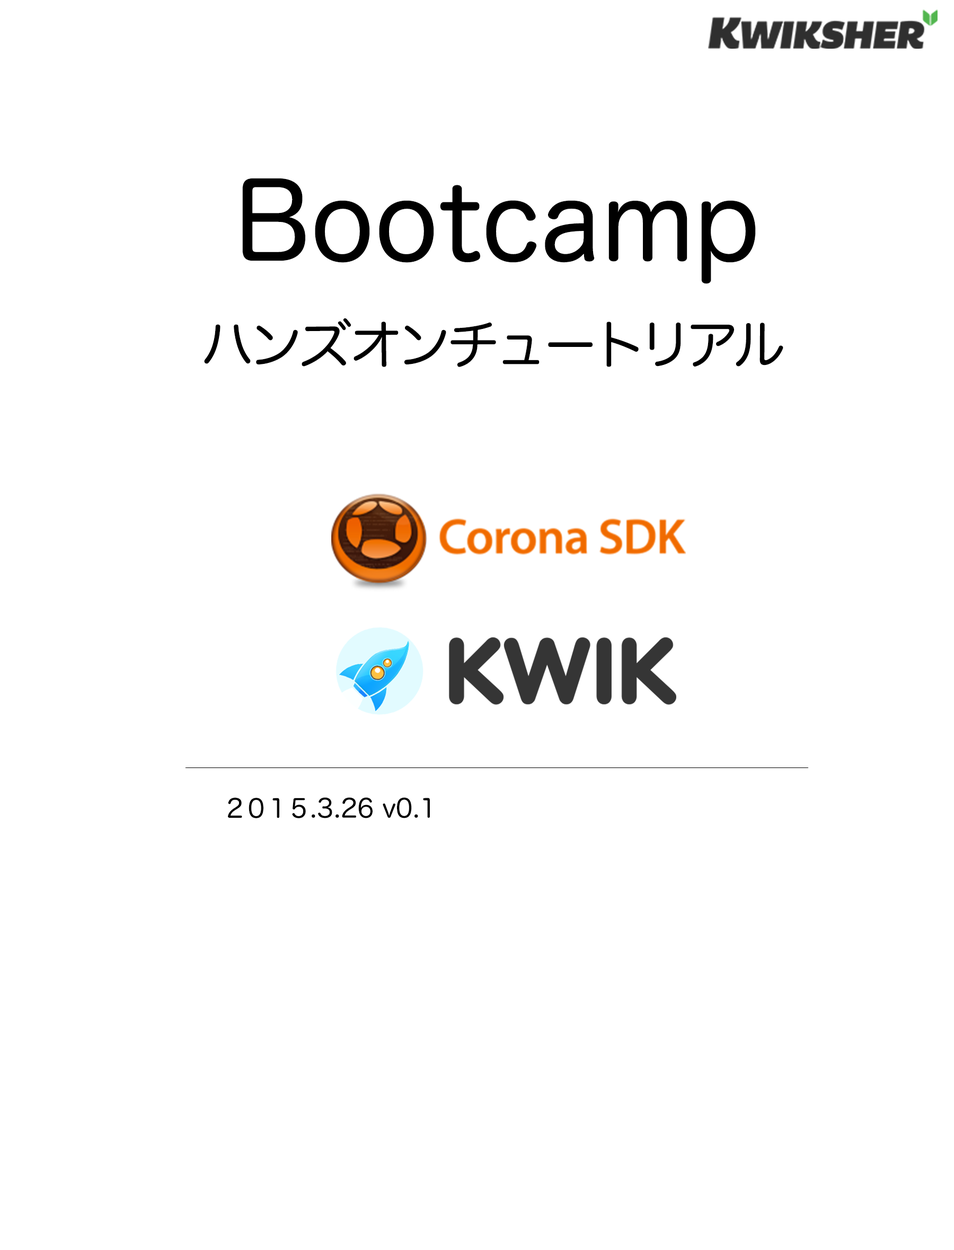
<style>
.page{position:relative;width:954px;height:1250px;background:#ffffff}
.page>*{position:absolute;margin:0}
.t1{font:105.8px "HiraMaruProN-W4";color:#000000}
.t2{font:52.9px "HiraMaruProN-W4";color:#000000}
.t3{font:25.4px "HiraMaruProN-W4";color:#000000}
</style>
<div class="page">
<p class="t1" style="left:242px;top:178px;width:514px;height:106px">Bootcamp</p>
<p class="t2" style="left:204px;top:318px;width:579px;height:49px">ハンズオンチュートリアル</p>
<p class="t3" style="left:228px;top:797px;width:202px;height:22px">２０１５.3.26 v0.1</p>
</div>
